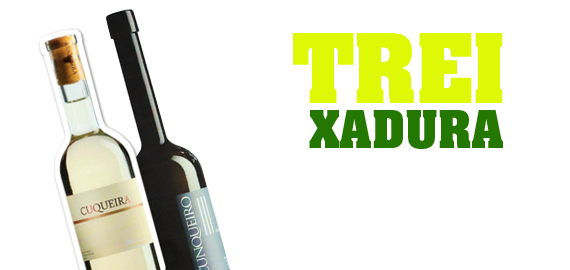
<style>
.page{position:relative;width:570px;height:270px;background:#ffffff}
.page>*{position:absolute;margin:0}
.t1{font:82px "AachenStd-Bold";letter-spacing:-0.005em;color:#def806}
.t2{font:44px "AachenStd-Bold";letter-spacing:0.01em;color:#247802}
</style>
<div class="page">
<p class="t1" style="left:293px;top:33px;width:210px;height:70px">TREI</p>
<p class="t2" style="left:309px;top:110px;width:194px;height:39px">XADURA</p>
</div>
